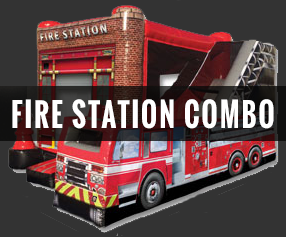
<style>
.page{position:relative;width:286px;height:237px;background:#333333}
.page>*{position:absolute;margin:0}
.t1{font:31.5px "Oswald-Bold";letter-spacing:0.075em;color:#ffffff;scale:0.86 1}
</style>
<div class="page">
<p class="t1" style="left:12px;top:99px;width:262px;height:30px">FIRE STATION COMBO</p>
</div>
